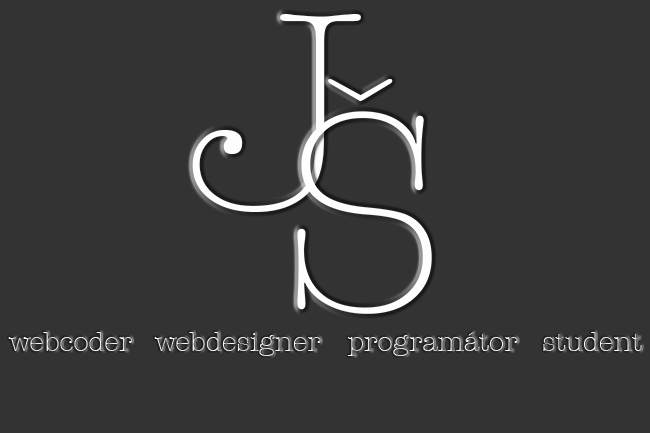
<style>
.page{position:relative;width:650px;height:433px;background:#333333}
.page>*{position:absolute;margin:0}
.t1{font:287.1px "AmericanTypewriter-Light";color:#fdfdfd}
.t2{font:200px "AmericanTypewriter-Light";color:#fefefe}
.t3{font:27.6px "AmericanTypewriter-Light"}
</style>
<div class="page">
<p class="t1" style="left:192px;top:14px;width:169px;height:198px">J</p>
<p class="t2" style="left:328px;top:79px;width:65px;height:22px">ˇ</p>
<p class="t3" style="left:8px;top:332px;width:125px;height:19px">webcoder</p>
<p class="t3" style="left:154px;top:332px;width:167px;height:24px">webdesigner</p>
<p class="t3" style="left:347px;top:332px;width:171px;height:24px">programátor</p>
<p class="t3" style="left:543px;top:332px;width:99px;height:19px">student</p>
</div>
